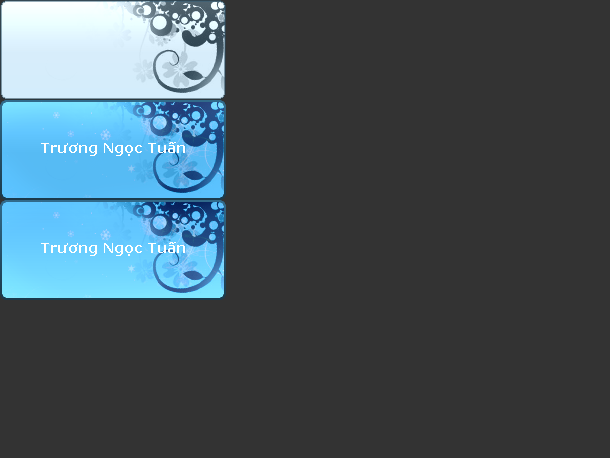
<style>
.page{position:relative;width:610px;height:458px;background:#333333}
.page>*{position:absolute;margin:0}
.t1{font:14px "Verdana-Bold";color:#ffffff}
</style>
<div class="page">
<p class="t1" style="left:41px;top:142px;width:144px;height:14px">Trương Ngọc Tuấn</p>
<p class="t1" style="left:41px;top:242px;width:144px;height:14px">Trương Ngọc Tuấn</p>
</div>
